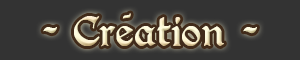
<style>
.page{position:relative;width:300px;height:60px;background:#333333}
.page>*{position:absolute;margin:0}
.t1{font:30px "PerryGothic"}
.t2{font:18.9px "PerryGothic";scale:1.11 1}
</style>
<div class="page">
<p class="t1" style="left:43px;top:16px;width:214px;height:31px">- Creation -</p>
<p class="t2" style="left:122px;top:13px;width:9px;height:6px;rotate:-23deg">-</p>
</div>
